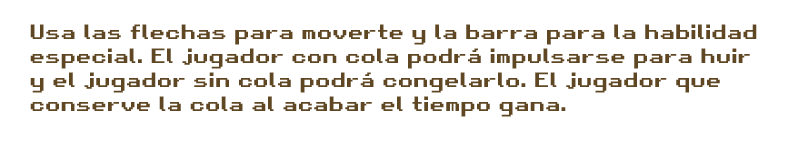
<style>
.page{position:relative;width:800px;height:150px;background:#ffffff}
.page>*{position:absolute;margin:0}
.t1{font:20px "RetroGaming";color:#5f4724}
</style>
<div class="page">
<p class="t1" style="left:30px;top:24px;width:727px;height:93px">Usa las flechas para moverte y la barra para la habilidad especial. El jugador con cola podrá impulsarse para huir y el jugador sin cola podrá congelarlo. El jugador que conserve la cola al acabar el tiempo gana.</p>
</div>
